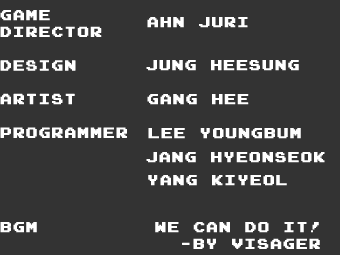
<style>
.page{position:relative;width:340px;height:255px;background:#333333}
.page>*{position:absolute;margin:0}
.t1{font:14px "JoystixMonospace-Regular";letter-spacing:0.065em;color:#ffffff;font-weight:bold}
</style>
<div class="page">
<p class="t1" style="left:0px;top:10px;width:127px;height:128px">game<br>director<br><br>design<br><br>artist<br><br>programmer</p>
<p class="t1" style="left:147px;top:17px;width:101px;height:11px">ahn juri</p>
<p class="t1" style="left:146px;top:60px;width:153px;height:11px">jung heesung</p>
<p class="t1" style="left:147px;top:94px;width:102px;height:11px">gang hee</p>
<p class="t1" style="left:148px;top:128px;width:153px;height:11px">lee youngbum</p>
<p class="t1" style="left:146px;top:152px;width:179px;height:11px">jang hyeonseok</p>
<p class="t1" style="left:148px;top:175px;width:139px;height:11px">yang kiyeol</p>
<p class="t1" style="left:0px;top:222px;width:320px;height:27px">BGM         We Can Do It! <br>     -by Visager</p>
</div>
